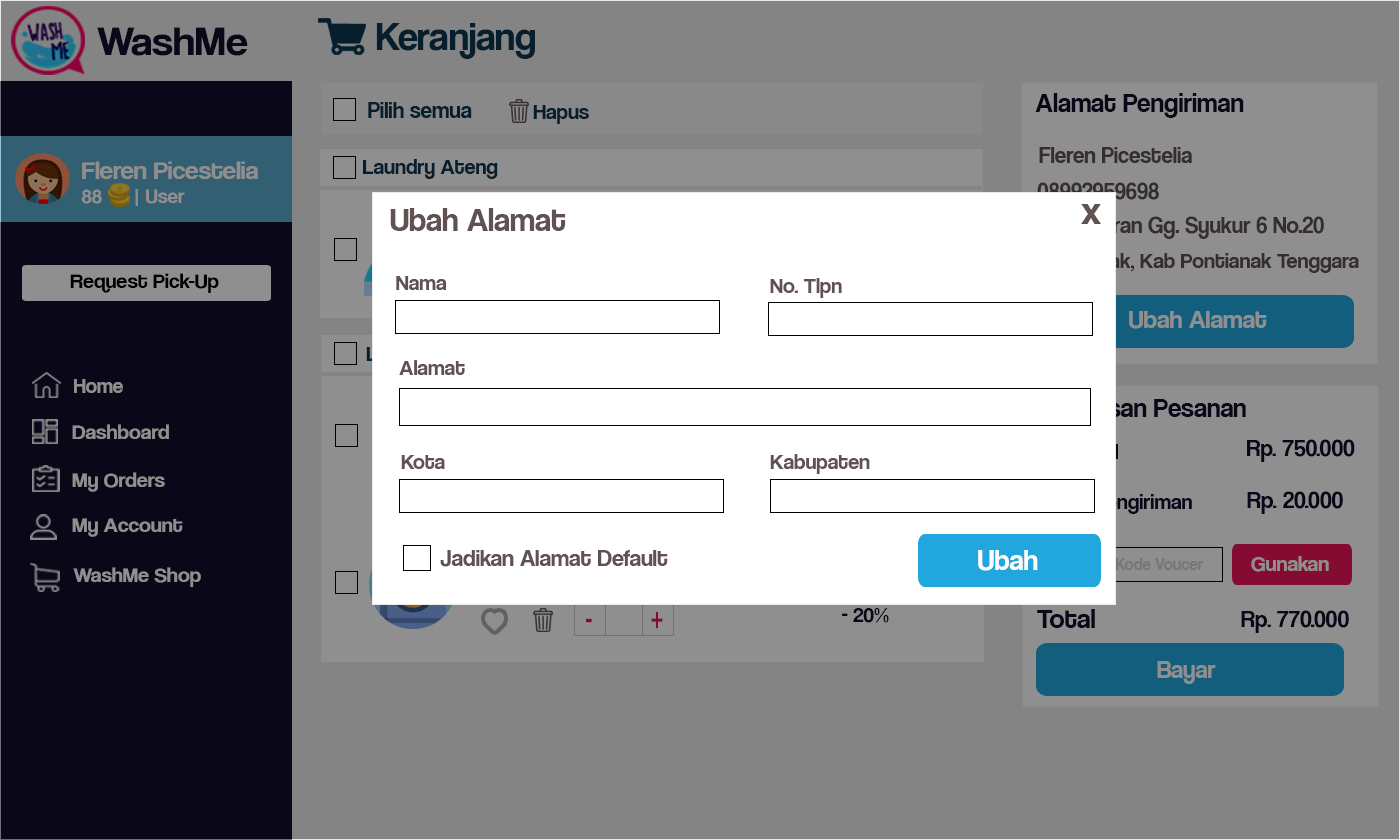
<style>
.page{position:relative;width:1400px;height:840px;background:#848484}
.page>*{position:absolute;margin:0}
.t1{font:42.1px "CoolveticaRg-Regular";color:#120f2b;scale:1.05 1}
.t2{font:40.4px "CoolveticaRg-Regular";color:#071e2c}
.t3{font:23px "CoolveticaRg-Regular";color:#071e2c}
.t4{font:27px "CoolveticaRg-Regular";color:#120f2b}
.t5{font:22px "CoolveticaRg-Regular";color:#071e2c}
.t6{font:23px "CoolveticaRg-Regular";color:#362e2e}
.t7{font:25.2px "CoolveticaRg-Regular";color:#8f8f8f;scale:1.05 1}
.t8{font:20px "CoolveticaRg-Regular";color:#8f8f8f;scale:1.05 1}
.t9{font:33px "CoolveticaRg-Regular";color:#605252}
.t10{font:41px "CoolveticaRg-Regular";color:#605252}
.t11{font:22px "CoolveticaRg-Regular";color:#362e2e}
.t12{font:21px "CoolveticaRg-Regular";color:#000000;scale:1.05 1}
.t13{font:22px "CoolveticaRg-Regular";color:#605252}
.t14{font:26px "CoolveticaRg-Regular";color:#8f8f8f}
.t15{font:21px "CoolveticaRg-Regular";color:#8f8f8f}
.t16{font:21px "CoolveticaRg-Regular";color:#8f8f8f;scale:1.05 1}
.t17{font:24px "CoolveticaRg-Regular";color:#120f2b}
.t18{font:24px "CoolveticaRg-Regular";color:#605252}
.t19{font:29px "CoolveticaRg-Regular";color:#fcfcfc}
.t20{font:22px "CoolveticaRg-Regular";color:#8f8f8f}
.t21{font:34.5px "CoolveticaRg-Regular";color:#850b33;scale:0.68 1}
.t22{font:22px "CoolveticaRg-Regular";color:#120f2b}
.t23{font:28px "CoolveticaRg-Regular";color:#120f2b}
.t24{font:25px "CoolveticaRg-Regular";color:#8f8f8f}
</style>
<div class="page">
<p class="t1" style="left:97px;top:27px;width:151px;height:29px">WashMe</p>
<p class="t2" style="left:376px;top:23px;width:159px;height:36px">Keranjang</p>
<p class="t3" style="left:368px;top:102px;width:104px;height:16px">Pilih semua</p>
<p class="t4" style="left:1035px;top:93px;width:209px;height:25px">Alamat Pengiriman</p>
<p class="t5" style="left:533px;top:105px;width:56px;height:19px">Hapus</p>
<p class="t6" style="left:1039px;top:147px;width:153px;height:16px">Fleren Picestelia</p>
<p class="t7" style="left:81px;top:161px;width:177px;height:45px">Fleren Picestelia<br><span class="t8">88      | User</span></p>
<p class="t5" style="left:363px;top:159px;width:135px;height:20px">Laundry Ateng</p>
<p class="t6" style="left:1037px;top:182px;width:122px;height:18px">08992959698</p>
<p class="t9" style="left:390px;top:208px;width:176px;height:23px">Ubah Alamat</p>
<p class="t10" style="left:1081px;top:204px;width:20px;height:20px">x</p>
<p class="t6" style="left:1036px;top:216px;width:288px;height:23px">Jln Veteran Gg. Syukur 6 No.20</p>
<p class="t11" style="left:1040px;top:253px;width:319px;height:20px">Pontianak, Kab Pontianak Tenggara</p>
<p class="t12" style="left:70px;top:273px;width:149px;height:20px">Request Pick-Up</p>
<p class="t13" style="left:396px;top:276px;width:50px;height:14px">Nama</p>
<p class="t13" style="left:770px;top:278px;width:72px;height:20px">No. Tlpn</p>
<p class="t14" style="left:1129px;top:311px;width:138px;height:18px">Ubah Alamat</p>
<p class="t13" style="left:399px;top:360px;width:66px;height:15px">Alamat</p>
<p class="t15" style="left:74px;top:379px;width:49px;height:14px">Home</p>
<p class="t16" style="left:72px;top:424px;width:97px;height:15px">Dashboard</p>
<p class="t17" style="left:1247px;top:439px;width:108px;height:23px">Rp. 750.000</p>
<p class="t13" style="left:401px;top:455px;width:44px;height:14px">Kota</p>
<p class="t13" style="left:770px;top:454px;width:100px;height:20px">Kabupaten</p>
<p class="t16" style="left:72px;top:472px;width:93px;height:20px">My Orders</p>
<p class="t17" style="left:1247px;top:491px;width:96px;height:23px">Rp. 20.000</p>
<p class="t16" style="left:72px;top:518px;width:111px;height:19px">My Account</p>
<p class="t18" style="left:440px;top:550px;width:228px;height:17px">Jadikan Alamat Default</p>
<p class="t19" style="left:978px;top:550px;width:60px;height:21px">Ubah</p>
<p class="t20" style="left:1251px;top:556px;width:78px;height:16px">Gunakan</p>
<p class="t16" style="left:73px;top:567px;width:128px;height:20px">WashMe Shop</p>
<p class="t21" style="left:651px;top:612px;width:12px;height:17px">+</p>
<p class="t22" style="left:842px;top:608px;width:47px;height:15px">- 20%</p>
<p class="t23" style="left:1037px;top:609px;width:58px;height:19px">Total</p>
<p class="t17" style="left:1241px;top:610px;width:108px;height:23px">Rp. 770.000</p>
<p class="t21" style="left:586px;top:618px;width:6px;height:5px">-</p>
<p class="t24" style="left:1157px;top:661px;width:59px;height:23px">Bayar</p>
</div>
